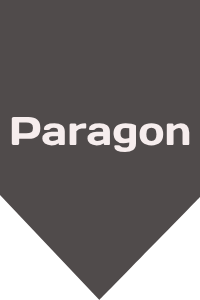
<style>
.page{position:relative;width:200px;height:300px;background:#504b4b}
.page>*{position:absolute;margin:0}
.t1{font:40px "DaysOne-Regular";color:#f6eded}
</style>
<div class="page">
<p class="t1" style="left:11px;top:117px;width:179px;height:35px">Paragon</p>
</div>
